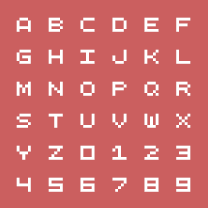
<style>
.page{position:relative;width:208px;height:208px;background:#cb5f5f}
.page>*{position:absolute;margin:0}
.t1{font:14px "QuinqueFive";letter-spacing:-0.06em;color:#ffffff}
</style>
<div class="page">
<p class="t1" style="left:16px;top:17px;width:175px;height:15px">A B C D E F</p>
<p class="t1" style="left:16px;top:49px;width:175px;height:15px">G H I J K L</p>
<p class="t1" style="left:16px;top:81px;width:175px;height:15px">M N O P Q R</p>
<p class="t1" style="left:16px;top:113px;width:175px;height:15px">S T U V W X</p>
<p class="t1" style="left:16px;top:145px;width:175px;height:15px">Y Z 0 1 2 3</p>
<p class="t1" style="left:16px;top:177px;width:175px;height:15px">4 5 6 7 8 9</p>
</div>
